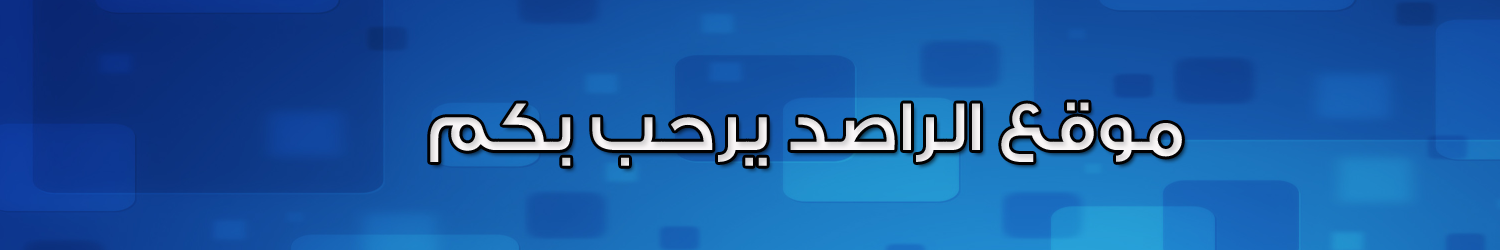
<style>
.page{position:relative;width:1500px;height:250px}
.page>*{position:absolute;margin:0}
.t1{font:72px "GESSTwoMedium-Medium";color:#fdf9f9}
</style>
<div class="page">
<p class="t1" style="left:430px;top:102px;width:752px;height:64px">موقع الراصد يرحب بكم</p>
</div>
